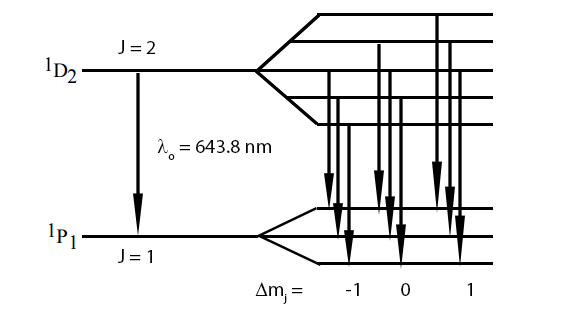
<style>
.page{position:relative;width:563px;height:309px;background:#ffffff}
.page>*{position:absolute;margin:0}
.t1{font:20px "MyriadPro-Regular";color:#000000}
.t2{font:20px "SymbolMT";color:#000000}
</style>
<div class="page">
<p class="t1" style="left:118px;top:40px;width:37px;height:14px">J = 2</p>
<p class="t1" style="left:157px;top:139px;width:114px;height:21px"><span class="t2">l</span>o = 643.8 nm</p>
<p class="t1" style="left:117px;top:249px;width:35px;height:14px">J = 1</p>
<p class="t1" style="left:255px;top:282px;width:217px;height:22px"><span class="t2">D</span>mj =          -1         0             1</p>
</div>
